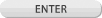
<style>
.page{position:relative;width:102px;height:18px;background:#eaeaea}
.page>*{position:absolute;margin:0}
.t1{font:11px "MyriadPro-Regular";letter-spacing:0.05em;color:#404040}
</style>
<div class="page">
<p class="t1" style="left:35px;top:5px;width:32px;height:8px">ENTER</p>
</div>
